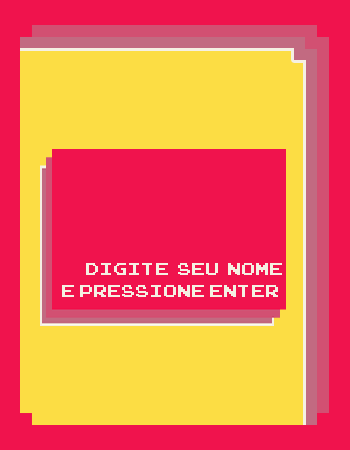
<style>
.page{position:relative;width:350px;height:450px;background:#f0134d}
.page>*{position:absolute;margin:0}
.t1{font:24px/36px "ArcadeClassic";letter-spacing:0.04em;color:#f5f0e3}
</style>
<div class="page">
<p class="t1" style="left:62px;top:263px;width:220px;height:34px;text-align:right">digite  seu  nome<br>     e pressione enter</p>
</div>
